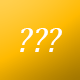
<style>
.page{position:relative;width:80px;height:80px}
.page>*{position:absolute;margin:0}
.t1{font:36px "Cambria-Italic";color:#ffffff}
</style>
<div class="page">
<p class="t1" style="left:20px;top:28px;width:42px;height:24px">???</p>
</div>
